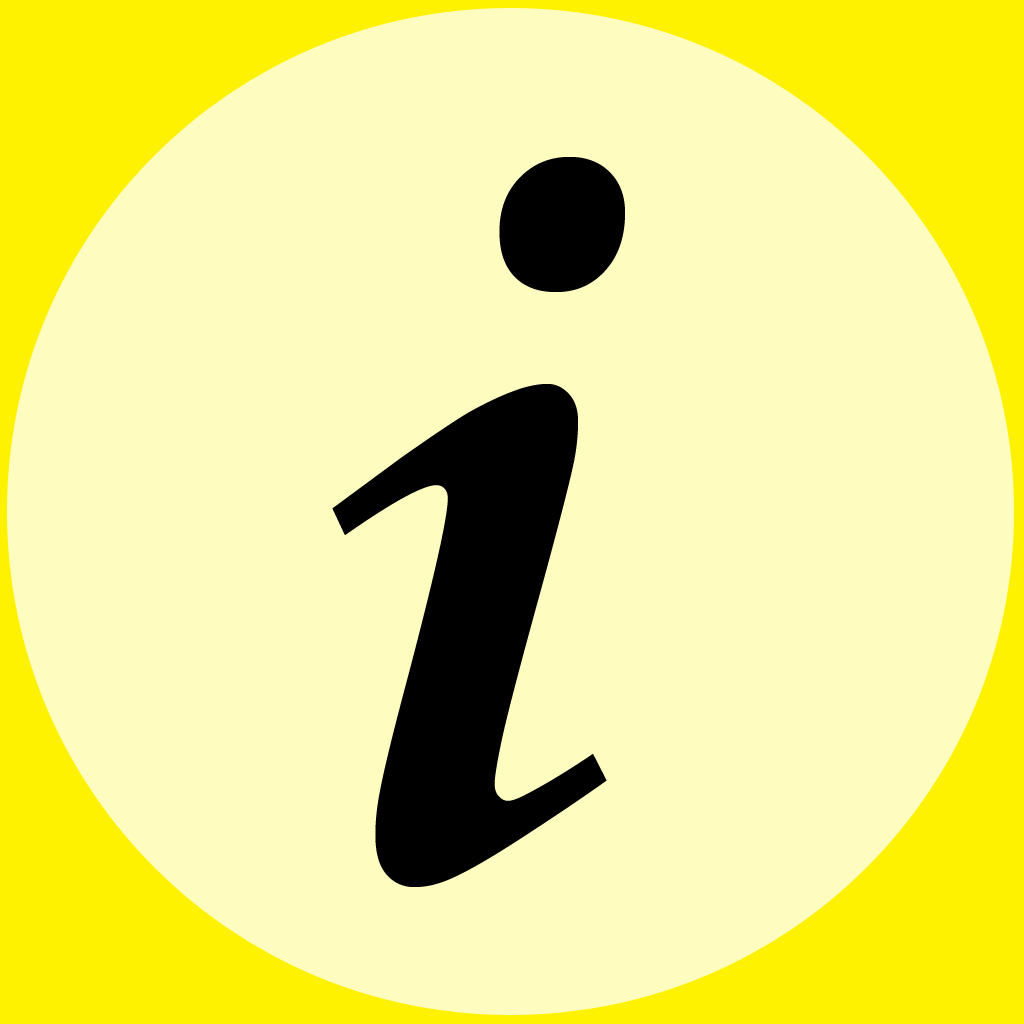
<style>
.page{position:relative;width:1024px;height:1024px;background:#fffcbf}
.page>*{position:absolute;margin:0}
.t1{font:1024px "Palatino-BoldItalic";color:#000000}
</style>
<div class="page">
<p class="t1" style="left:332px;top:157px;width:293px;height:730px">i</p>
</div>
